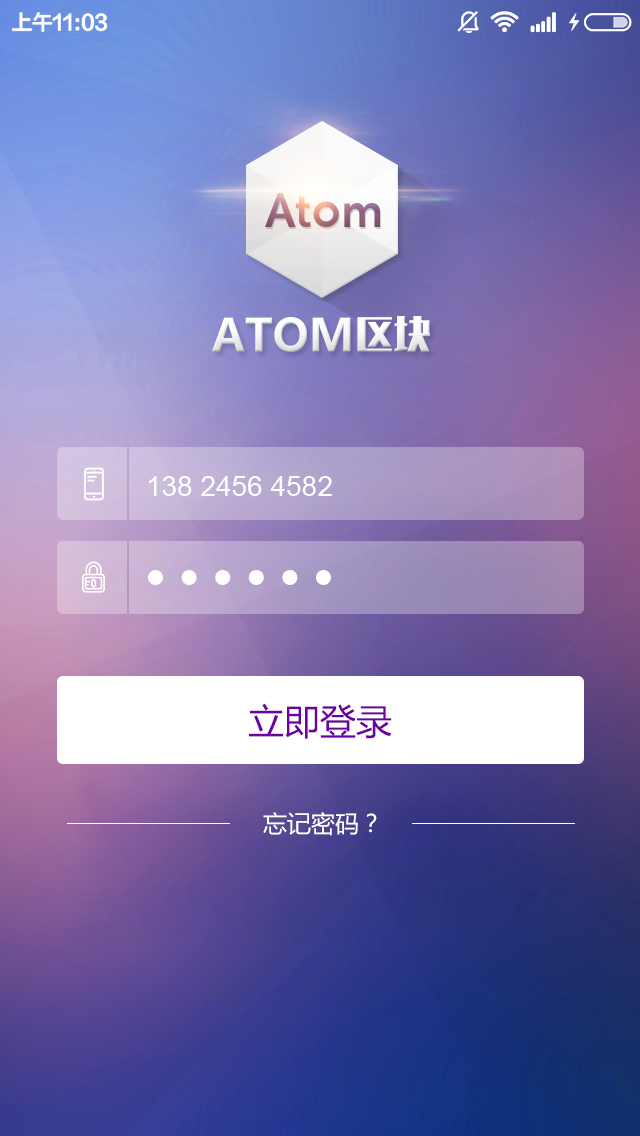
<style>
.page{position:relative;width:640px;height:1136px}
.page>*{position:absolute;margin:0}
.t1{font:28px "ArialMT";color:#ffffff}
.t2{font:36px "MicrosoftYaHei";color:#6d00a5}
.t3{font:24px "MicrosoftYaHei";color:#ffffff}
</style>
<div class="page">
<p class="t1" style="left:149px;top:476px;width:183px;height:20px">138 2456 4582</p>
<p class="t2" style="left:249px;top:703px;width:143px;height:36px">立即登录</p>
<p class="t3" style="left:263px;top:812px;width:114px;height:24px">忘记密码？</p>
</div>
